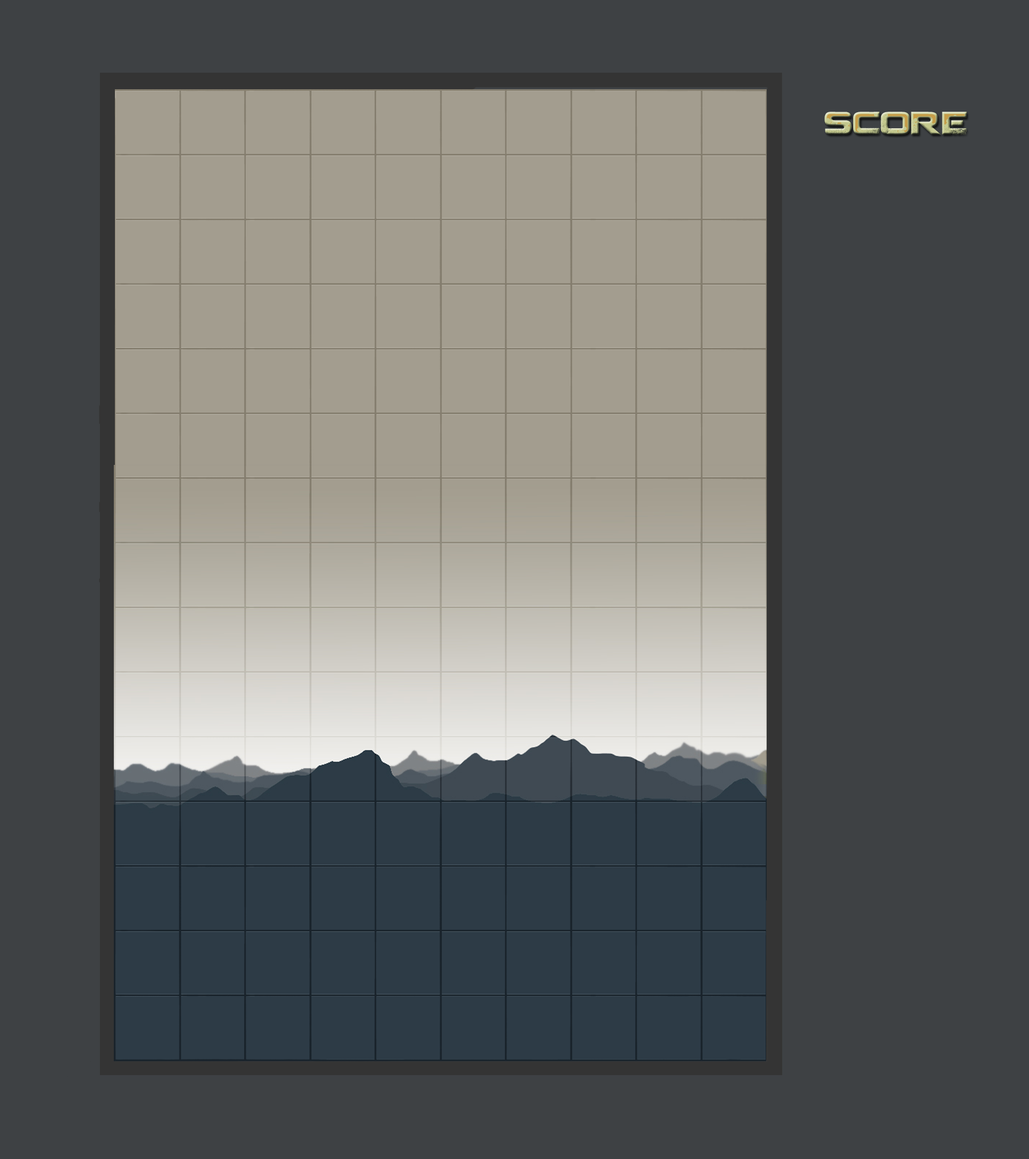
<style>
.page{position:relative;width:1029px;height:1159px;background:#3e4144}
.page>*{position:absolute;margin:0}
.t1{font:31.8px "Coalition";letter-spacing:0.01em}
</style>
<div class="page">
<p class="t1" style="left:824px;top:112px;width:143px;height:23px">SCORE</p>
</div>
